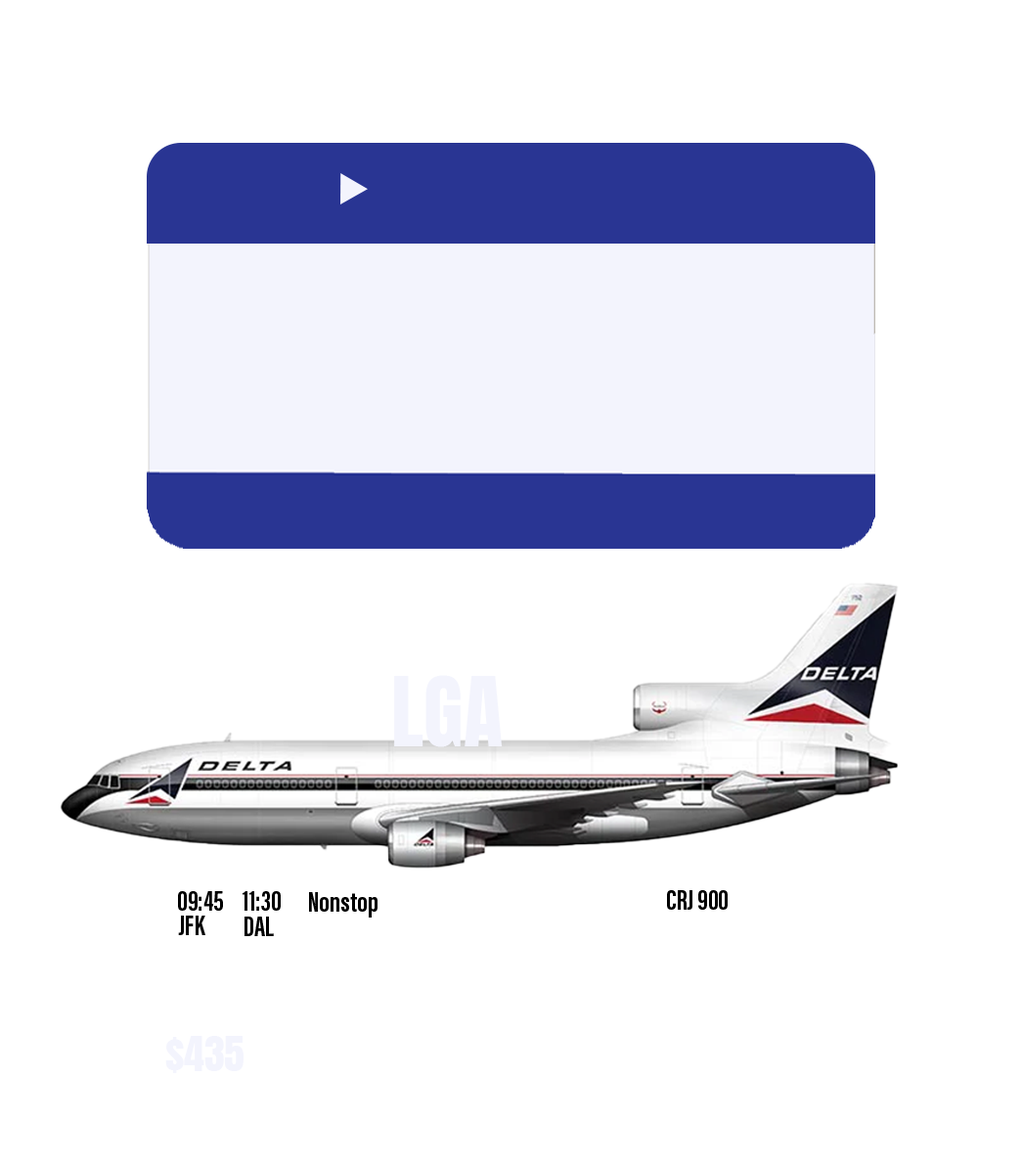
<style>
.page{position:relative;width:1022px;height:1166px;background:#ffffff}
.page>*{position:absolute;margin:0}
.t1{font:81.5px "Anton-Regular";color:#f3f4fd}
.t2{font:28.5px "AcuminProExtraCond-Bold";color:#000000}
.t3{font:40.8px "Anton-Regular";color:#f3f4fd}
</style>
<div class="page">
<p class="t1" style="left:394px;top:675px;width:109px;height:73px">LGA</p>
<p class="t2" style="left:178px;top:891px;width:45px;height:20px">09:45</p>
<p class="t2" style="left:243px;top:891px;width:38px;height:20px">11:30</p>
<p class="t2" style="left:309px;top:892px;width:69px;height:26px">Nonstop</p>
<p class="t2" style="left:667px;top:890px;width:61px;height:20px">CRJ 900</p>
<p class="t2" style="left:178px;top:916px;width:27px;height:19px">JFK</p>
<p class="t2" style="left:245px;top:917px;width:29px;height:19px">DAL</p>
<p class="t3" style="left:165px;top:1036px;width:79px;height:37px">$435</p>
</div>
